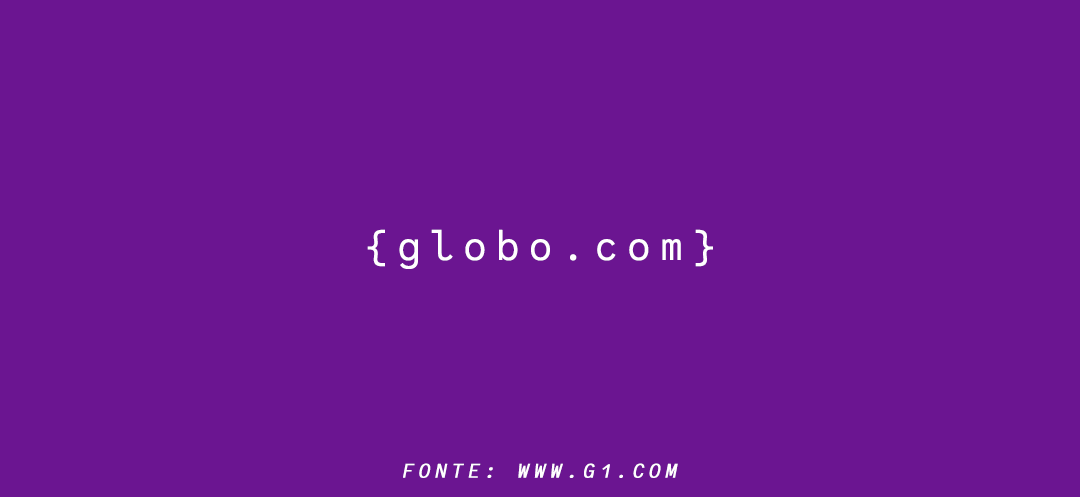
<style>
.page{position:relative;width:1080px;height:500px;background:#6b1591}
.page>*{position:absolute;margin:0}
.t1{font:41.7px "CodeSaver-Regular";letter-spacing:0.2em;color:#ffffff;font-weight:bold}
.t2{font:20.8px "CodeSaver-Regular";letter-spacing:0.2em;color:#ffffff;text-transform:uppercase;font-weight:bold;font-style:italic}
</style>
<div class="page">
<p class="t1" style="left:367px;top:229px;width:346px;height:40px">{globo.com}</p>
<p class="t2" style="left:403px;top:463px;width:275px;height:15px">Fonte: www.g1.com</p>
</div>
